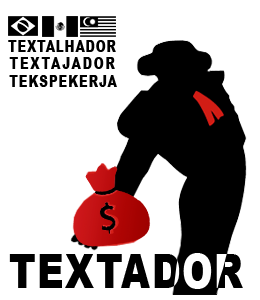
<style>
.page{position:relative;width:260px;height:300px;background:#ffffff}
.page>*{position:absolute;margin:0}
.t1{font:15.6px "Arial-Black";letter-spacing:0.05em;color:#000000;scale:0.78 1}
.t2{font:15.6px "Arial-Black";letter-spacing:0.13em;color:#000000;scale:0.78 1}
.t3{font:15.6px "Arial-Black";letter-spacing:0.07em;color:#000000;scale:0.78 1}
.t4{font:48.1px "Arial-Black";letter-spacing:0.05em;color:#000000;scale:0.76 1}
</style>
<div class="page">
<p class="t1" style="left:8px;top:40px;width:108px;height:12px">TEXTALHADOR</p>
<p class="t2" style="left:9px;top:57px;width:106px;height:12px">TEXTAJADOR</p>
<p class="t3" style="left:9px;top:75px;width:108px;height:12px">TEKSPEKERJA</p>
<p class="t4" style="left:9px;top:253px;width:234px;height:36px">TEXTADOR</p>
</div>
